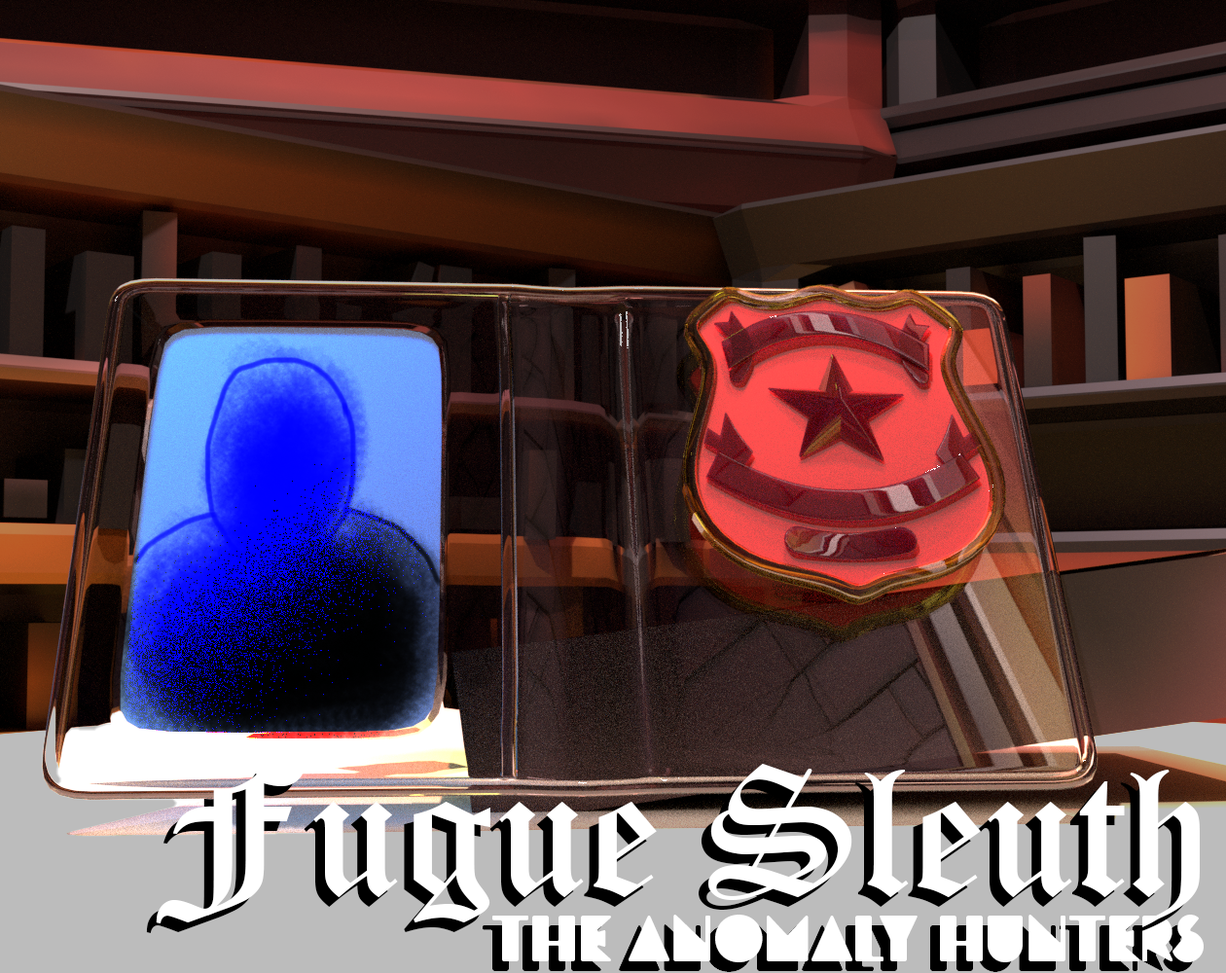
<style>
.page{position:relative;width:1226px;height:973px}
.page>*{position:absolute;margin:0}
.t1{font:182.2px "OldEnglishTextMT";color:#ffffff}
.t2{font:61px "AMFuturismo-Regular";color:#ffffff}
.t3{font:61px "AMFuturismo-Regular"}
</style>
<div class="page">
<p class="t1" style="left:156px;top:764px;width:1043px;height:159px">Fugue Sleuth</p>
<p class="t2" style="left:492px;top:914px;width:711px;height:48px">The Anomaly Hunters</p>
<p class="t3" style="left:483px;top:924px;width:711px;height:48px">The Anomaly Hunters</p>
</div>
